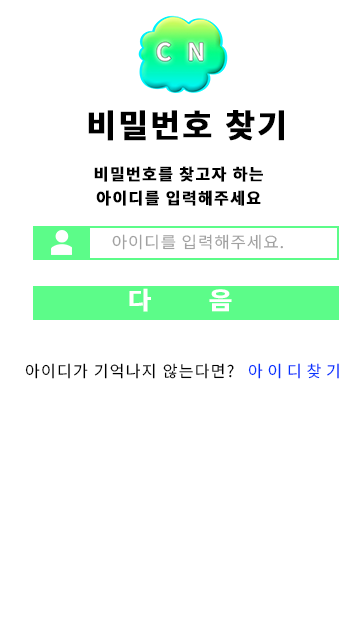
<style>
.page{position:relative;width:360px;height:620px;background:#ffffff}
.page>*{position:absolute;margin:0}
.t1{font:32px "NotoSansKR-Bold";letter-spacing:0.06em;color:#000000;font-weight:bold}
.t2{font:16px/24px "NotoSansKR-Bold";letter-spacing:0.06em;color:#000000;text-transform:uppercase;font-weight:bold}
.t3{font:16px "NotoSansKR-Regular";letter-spacing:0.05em;color:#a1a1a1;scale:1.05 1}
.t4{font:24px "NotoSansKR-Bold";letter-spacing:2.25em;color:#ffffff;font-weight:bold;scale:1.05 1}
.t5{font:16px "NotoSansKR-Regular";letter-spacing:0.08em;color:#000000}
.t6{font:16px "NotoSansKR-Regular";letter-spacing:0.3em;color:#000000}
.t7{font:16px "NotoSansKR-Regular";letter-spacing:0.3em;color:#0332fe}
</style>
<div class="page">
<p class="t1" style="left:88px;top:110px;width:196px;height:31px">비밀번호 찾기</p>
<p class="t2" style="left:94px;top:166px;width:169px;height:40px;text-align:center">비밀번호를 찾고자 하는<br>아이디를 입력해주세요</p>
<p class="t3" style="left:112px;top:234px;width:171px;height:16px">아이디를 입력해주세요.</p>
<p class="t4" style="left:129px;top:288px;width:103px;height:24px">다음</p>
<p class="t5" style="left:25px;top:363px;width:209px;height:16px">아이디가 기억나지 않는다면<span class="t6">?</span></p>
<p class="t7" style="left:248px;top:363px;width:91px;height:16px">아이디찾기</p>
</div>
